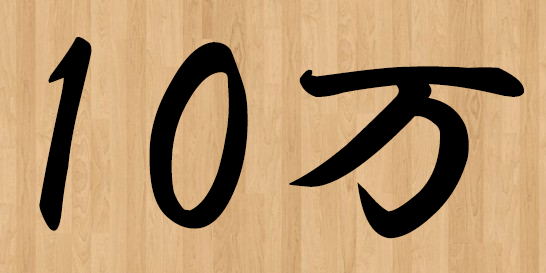
<style>
.page{position:relative;width:546px;height:273px}
.page>*{position:absolute;margin:0}
.t1{font:274.1px "HGPGyoshotai";color:#000000}
</style>
<div class="page">
<p class="t1" style="left:39px;top:37px;width:485px;height:202px">10万</p>
</div>
